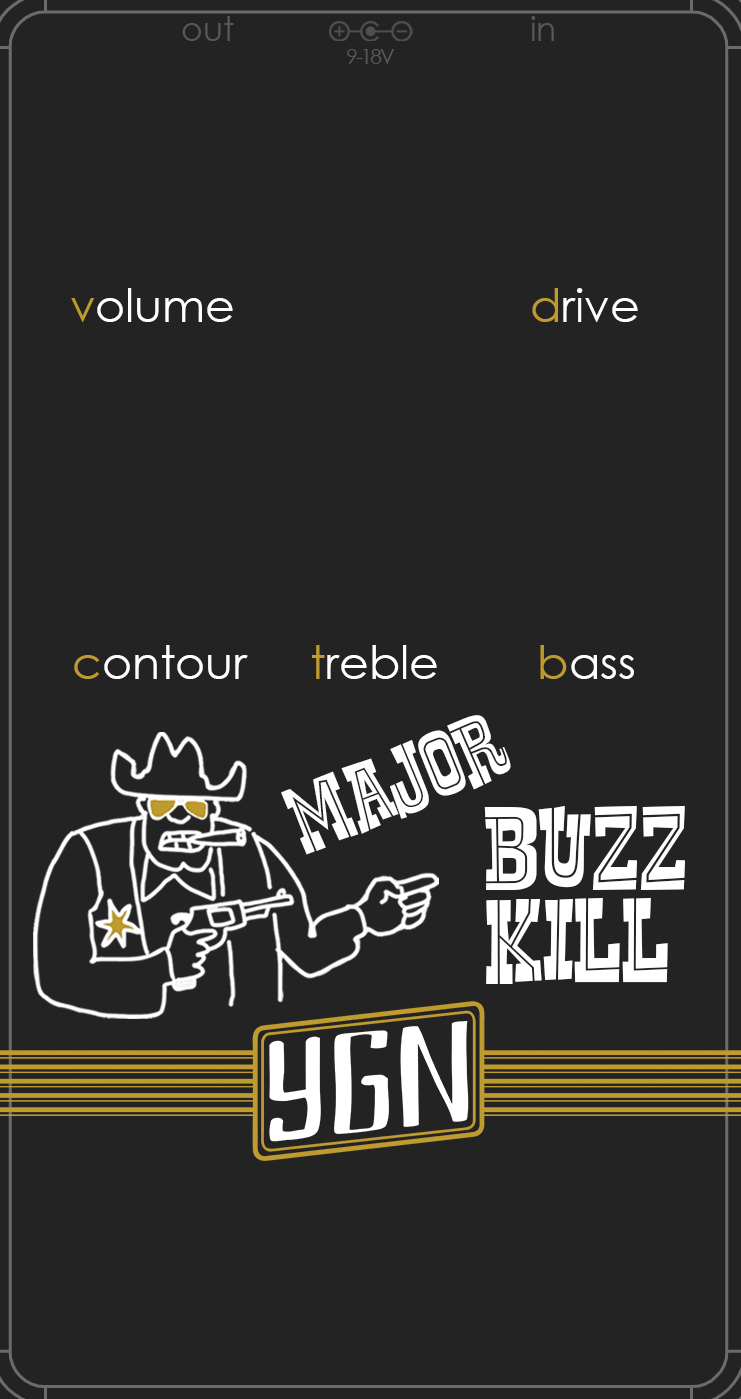
<style>
.page{position:relative;width:741px;height:1399px;background:#232323}
.page>*{position:absolute;margin:0}
.t1{font:33.3px "CenturyGothic";color:#585858}
.t2{font:21.5px "CenturyGothic";color:#585858}
.t3{font:21.5px "CenturyGothic";letter-spacing:-0.1em;color:#585858}
.t4{font:45.8px "CenturyGothic";color:#ffffff}
.t5{font:45.8px "CenturyGothic";color:#bf9b2f}
.t6{font:94.5px "RustlerFancy";color:#ffffff}
.t7{font:118.1px/94.5px "RustlerFancy";color:#ffffff}
.t8{font:118.1px/94.5px "RustlerFancy";letter-spacing:0.04em;color:#ffffff}
</style>
<div class="page">
<p class="t1" style="left:182px;top:16px;width:372px;height:25px">out                                in</p>
<p class="t2" style="left:347px;top:49px;width:47px;height:15px">9-<span class="t3">18</span>V</p>
<p class="t4" style="left:71px;top:288px;width:162px;height:34px"><span class="t5">v</span>olume</p>
<p class="t4" style="left:532px;top:288px;width:106px;height:34px"><span class="t5">d</span>rive</p>
<p class="t4" style="left:74px;top:645px;width:174px;height:34px"><span class="t5">c</span>ontour</p>
<p class="t4" style="left:312px;top:645px;width:125px;height:34px"><span class="t5">t</span>reble</p>
<p class="t4" style="left:540px;top:645px;width:94px;height:34px"><span class="t5">b</span>ass</p>
<p class="t6" style="left:281px;top:715px;width:230px;height:140px;rotate:-22deg">Major</p>
<p class="t7" style="left:484px;top:806px;width:201px;height:178px">BU<span class="t8">Z</span>Z<br>KILL</p>
</div>
